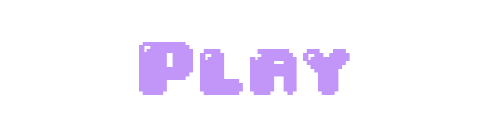
<style>
.page{position:relative;width:489px;height:135px;background:#ffffff}
.page>*{position:absolute;margin:0}
.t1{font:63.5px "04b30";letter-spacing:-0.005em;color:#c296f8;font-weight:bold}
</style>
<div class="page">
<p class="t1" style="left:139px;top:42px;width:211px;height:53px">Play</p>
</div>
